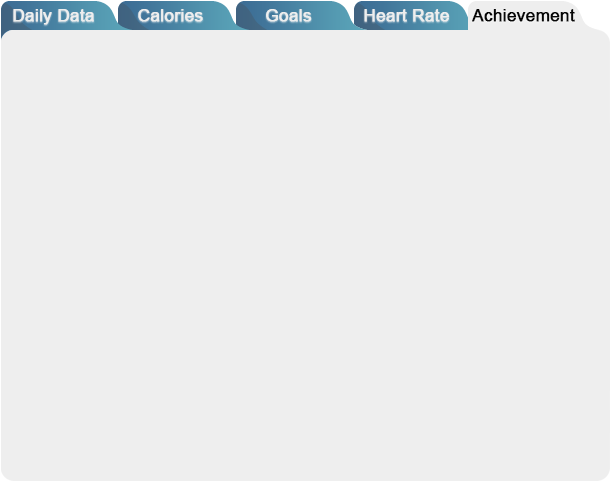
<style>
.page{position:relative;width:610px;height:482px;background:#eeeeee}
.page>*{position:absolute;margin:0}
.t1{font:16.9px "ArialMT";color:#eeeeee;font-weight:bold}
.t2{font:16.9px "ArialMT";color:#060606;font-weight:bold}
</style>
<div class="page">
<p class="t1" style="left:13px;top:9px;width:81px;height:16px">Daily Data</p>
<p class="t1" style="left:138px;top:9px;width:65px;height:13px">Calories</p>
<p class="t1" style="left:266px;top:9px;width:46px;height:13px">Goals</p>
<p class="t1" style="left:266px;top:9px;width:46px;height:13px">Goals</p>
<p class="t1" style="left:364px;top:9px;width:86px;height:13px">Heart Rate</p>
<p class="t2" style="left:472px;top:9px;width:103px;height:13px">Achievement</p>
</div>
